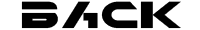
<style>
.page{position:relative;width:200px;height:30px;background:#ffffff}
.page>*{position:absolute;margin:0}
.t1{font:30px "Jet-Bradley";color:#000000;scale:1.25 1}
</style>
<div class="page">
<p class="t1" style="left:21px;top:1px;width:160px;height:28px">BACK</p>
</div>
